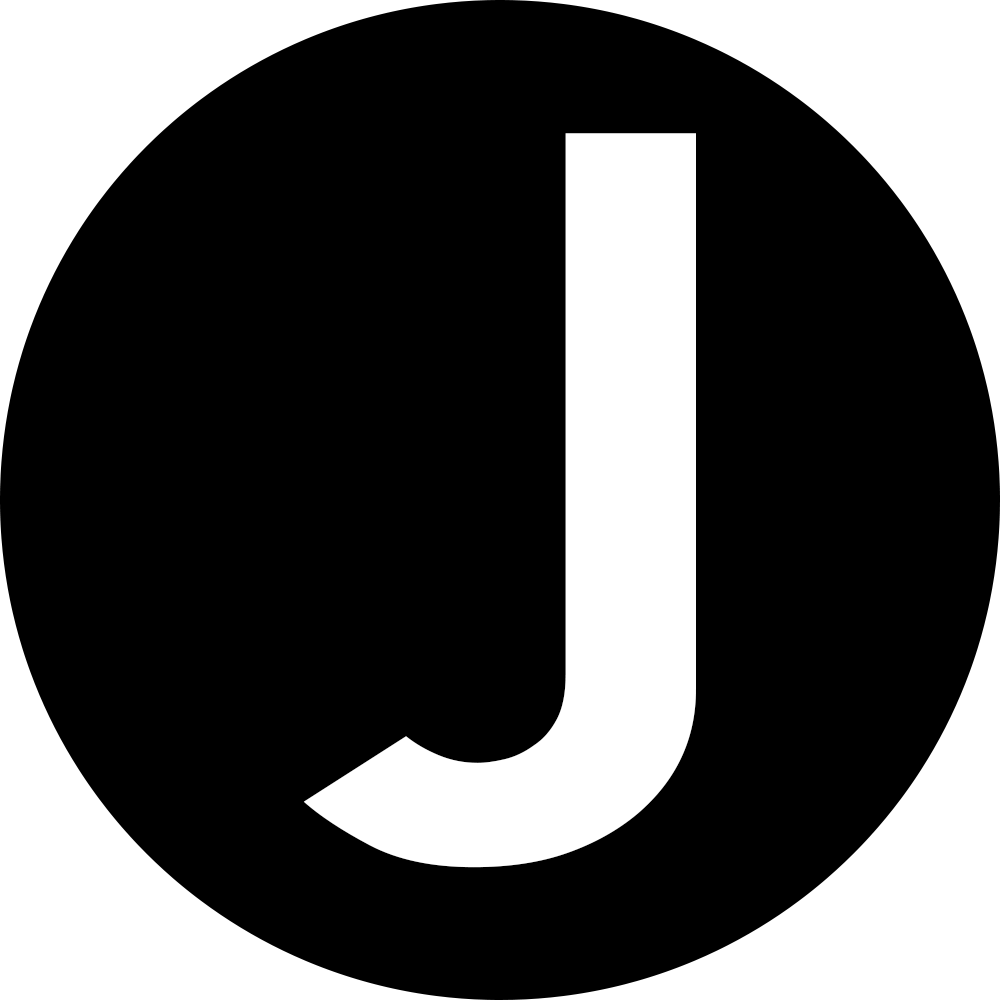
<style>
.page{position:relative;width:1000px;height:1000px;background:#000000}
.page>*{position:absolute;margin:0}
.t1{font:1021.6px "DINCondensed-Bold";color:#ffffff;scale:1.25 1}
</style>
<div class="page">
<p class="t1" style="left:303px;top:133px;width:393px;height:735px">J</p>
</div>
